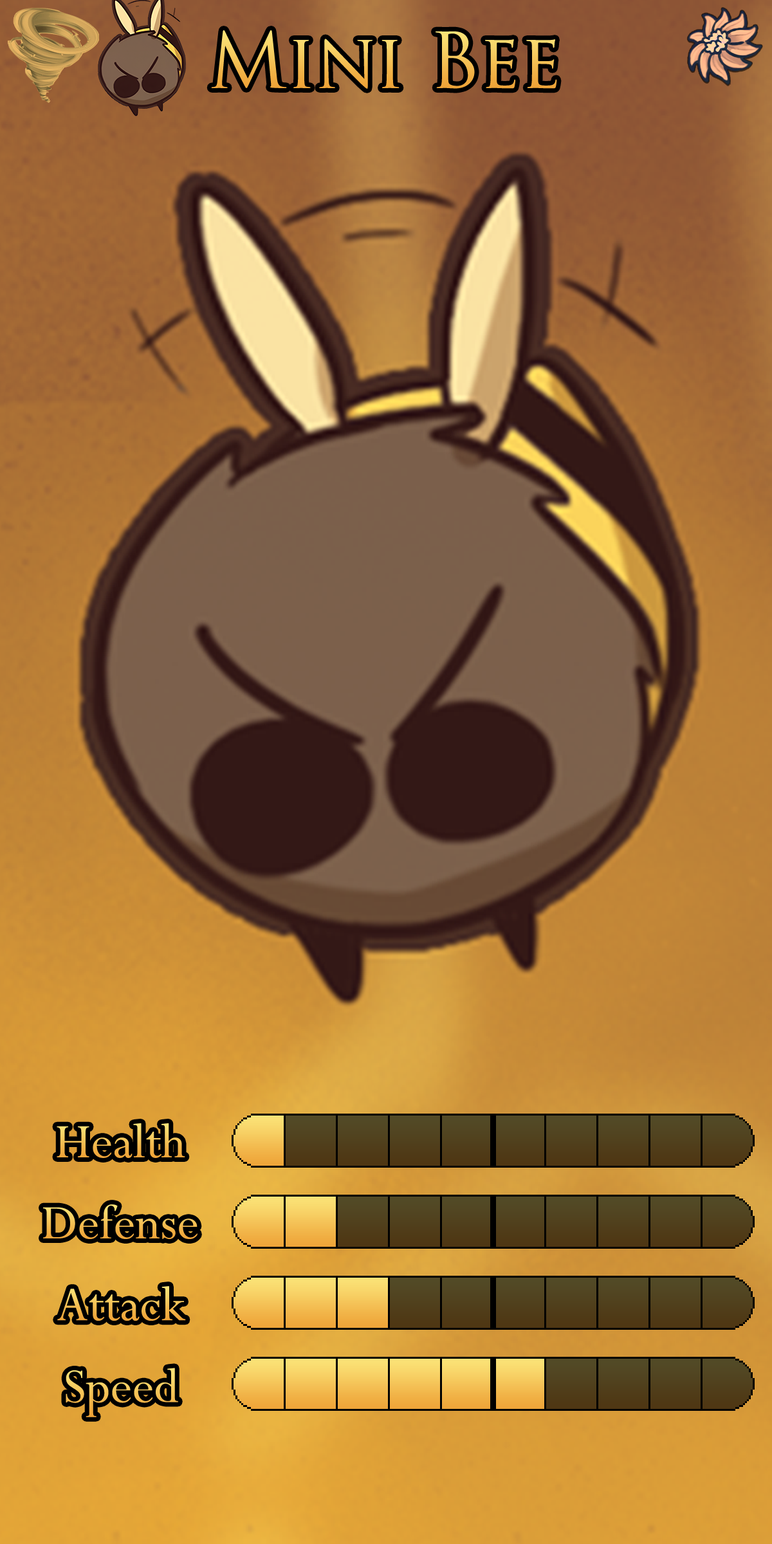
<style>
.page{position:relative;width:772px;height:1544px}
.page>*{position:absolute;margin:0}
.t1{font:128.7px "TrajanPro-Regular"}
.t2{font:92.7px "Perpetua"}
.t3{font:92.7px "Perpetua";color:#f2b94d}
.t4{font:92.7px "Perpetua";color:#f2b74c}
.t5{font:92.7px "Perpetua";color:#f5c75b}
</style>
<div class="page">
<p class="t1" style="left:211px;top:30px;width:346px;height:59px">Mini Bee</p>
<p class="t2" style="left:57px;top:1123px;width:128px;height:35px">Health</p>
<p class="t3" style="left:43px;top:1205px;width:155px;height:34px">Defense</p>
<p class="t4" style="left:57px;top:1286px;width:129px;height:35px">Attack</p>
<p class="t5" style="left:66px;top:1368px;width:112px;height:50px">Speed</p>
</div>
